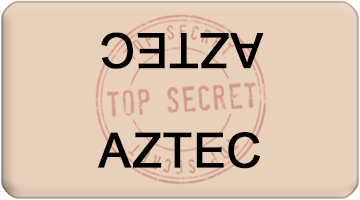
<style>
.page{position:relative;width:360px;height:200px;background:#e8d0bb}
.page>*{position:absolute;margin:0}
.t1{font:48px "ArialMT";color:#000000;font-weight:bold}
</style>
<div class="page">
<p class="t1" style="left:101px;top:32px;width:163px;height:37px;rotate:180deg">AZTEC</p>
<p class="t1" style="left:98px;top:132px;width:162px;height:37px">AZTEC</p>
</div>
